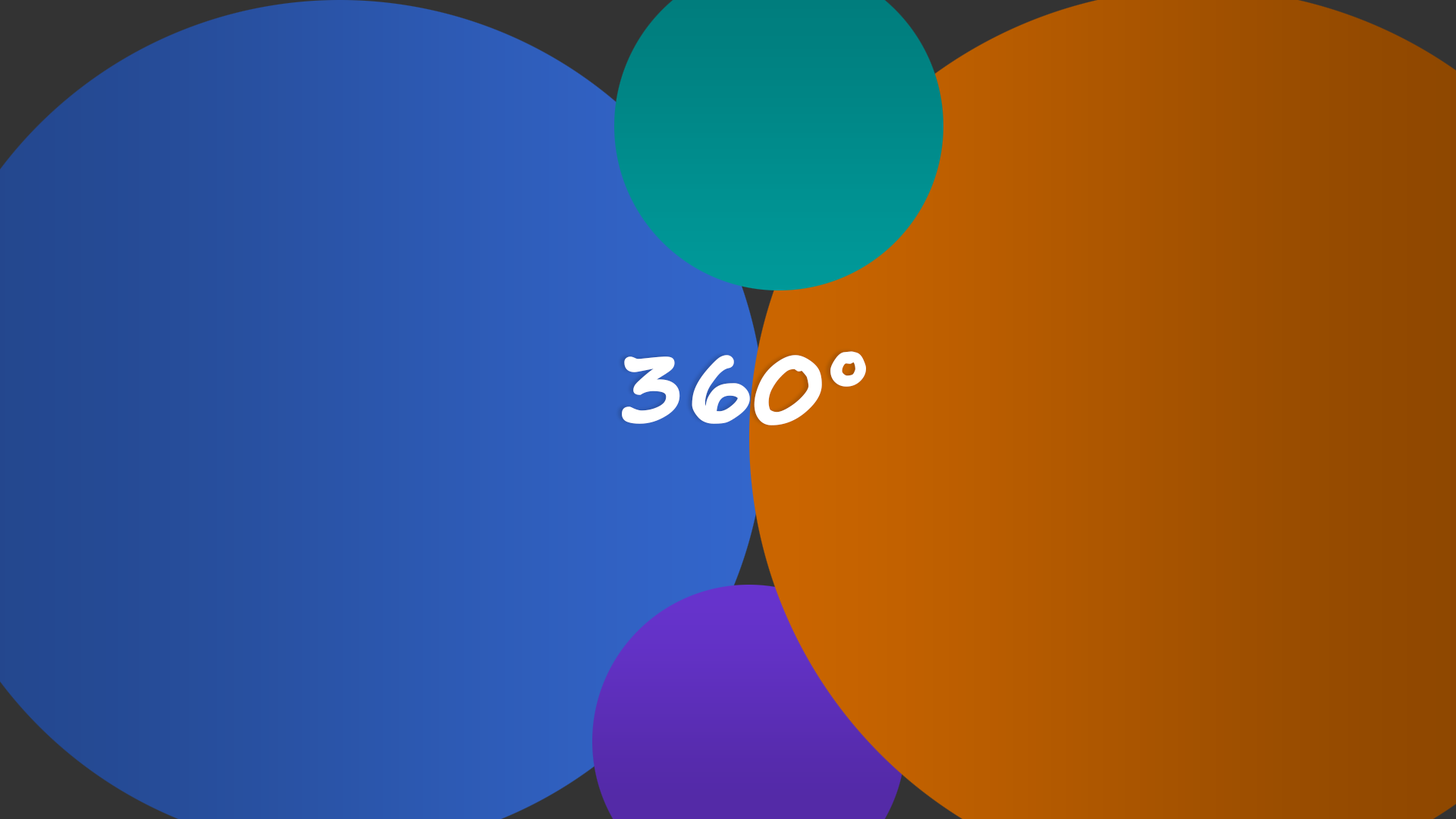
<style>
.page{position:relative;width:1456px;height:819px}
.page>*{position:absolute;margin:0}
.t1{font:100.1px "SegoePrint-Bold";color:#ffffff;font-weight:bold;scale:0.91 1}
</style>
<div class="page">
<p class="t1" style="left:622px;top:351px;width:244px;height:74px">360°</p>
</div>
